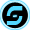
<style>
.page{position:relative;width:30px;height:30px;background:#000000}
.page>*{position:absolute;margin:0}
.t1{font:18.4px "TRON";color:#53d9ff;scale:0.85 1}
</style>
<div class="page">
<p class="t1" style="left:6px;top:6px;width:17px;height:19px">s</p>
</div>
